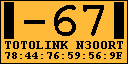
<style>
.page{position:relative;width:128px;height:64px;background:#ffba3a}
.page>*{position:absolute;margin:0}
.t1{font:50px "CourierNewPS-BoldMT";color:#000000}
.t2{font:12.5px "CourierNewPS-BoldMT";color:#000000}
.t3{font:11.2px "CourierNewPS-BoldMT";color:#000000}
</style>
<div class="page">
<p class="t1" style="left:24px;top:5px;width:80px;height:31px">-67</p>
<p class="t2" style="left:5px;top:41px;width:118px;height:8px">TOTOLINK N300RT</p>
<p class="t3" style="left:5px;top:52px;width:117px;height:7px">78:44:76:59:56:9F</p>
</div>
